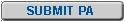
<style>
.page{position:relative;width:125px;height:22px;background:#cccccc}
.page>*{position:absolute;margin:0}
.t1{font:12px "Arial-BoldMT";letter-spacing:0.06em;color:#005596}
</style>
<div class="page">
<p class="t1" style="left:27px;top:6px;width:66px;height:9px">SUBMIT PA</p>
</div>
